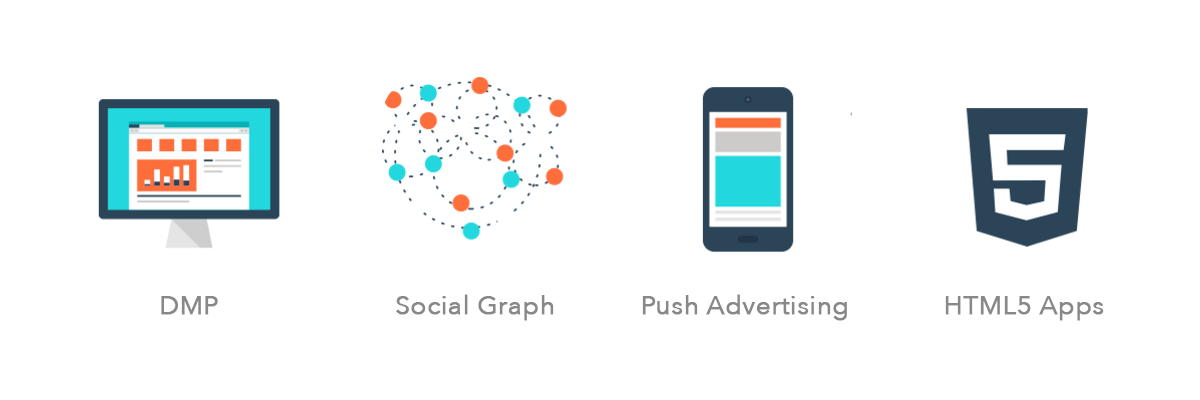
<style>
.page{position:relative;width:1200px;height:400px;background:#ffffff}
.page>*{position:absolute;margin:0}
.t1{font:26px "AvenirNext-Regular";color:#888888;font-weight:bold}
</style>
<div class="page">
<p class="t1" style="left:396px;top:294px;width:158px;height:27px">Social Graph</p>
<p class="t1" style="left:642px;top:294px;width:205px;height:27px">Push Advertising</p>
<p class="t1" style="left:161px;top:296px;width:57px;height:19px">DMP</p>
<p class="t1" style="left:945px;top:296px;width:159px;height:25px">HTML5 Apps</p>
</div>
